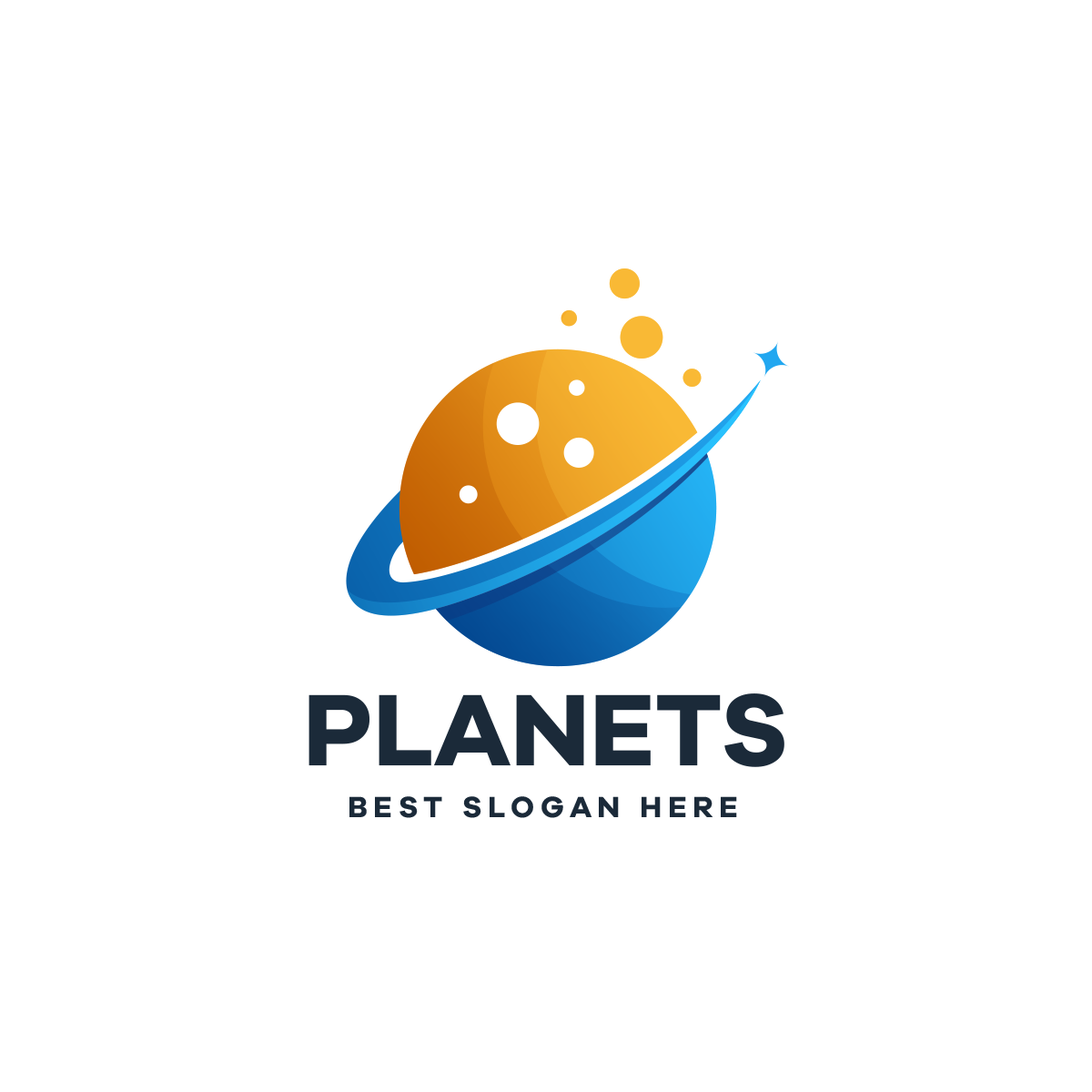
<style>
.page{position:relative;width:1092px;height:1092px;background:#ffffff}
.page>*{position:absolute;margin:0}
.t1{font:104.8px "GalanoGrotesque-Bold";color:#1c2a39}
.t2{font:30.3px "GalanoGrotesque-Bold";letter-spacing:0.2em;color:#1c2a39}
</style>
<div class="page">
<p class="t1" style="left:308px;top:693px;width:476px;height:74px">PLANETS</p>
<p class="t2" style="left:349px;top:796px;width:388px;height:22px">BEST SLOGAN HERE</p>
</div>
